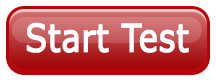
<style>
.page{position:relative;width:216px;height:81px;background:#ffffff}
.page>*{position:absolute;margin:0}
.t1{font:38.4px "Verdana";color:#ffffff;font-weight:bold;scale:0.83 1}
</style>
<div class="page">
<p class="t1" style="left:26px;top:22px;width:163px;height:31px">Start Test</p>
</div>
